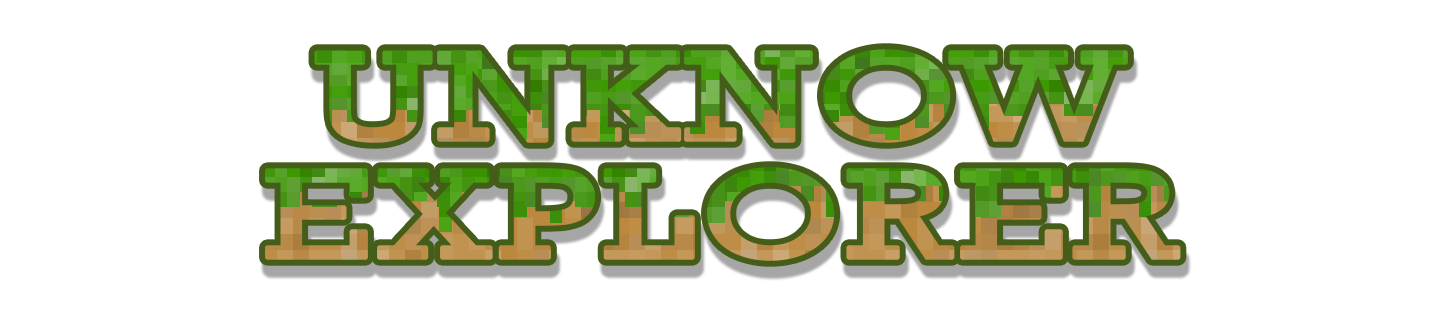
<style>
.page{position:relative;width:1442px;height:322px;background:#ffffff}
.page>*{position:absolute;margin:0}
.t1{font:130.1px/117.6px "Rockwell";font-weight:bold;scale:1.35 1}
</style>
<div class="page">
<p class="t1" style="left:265px;top:49px;width:916px;height:212px;text-align:center">UNKNOW<br>EXPLORER</p>
</div>
